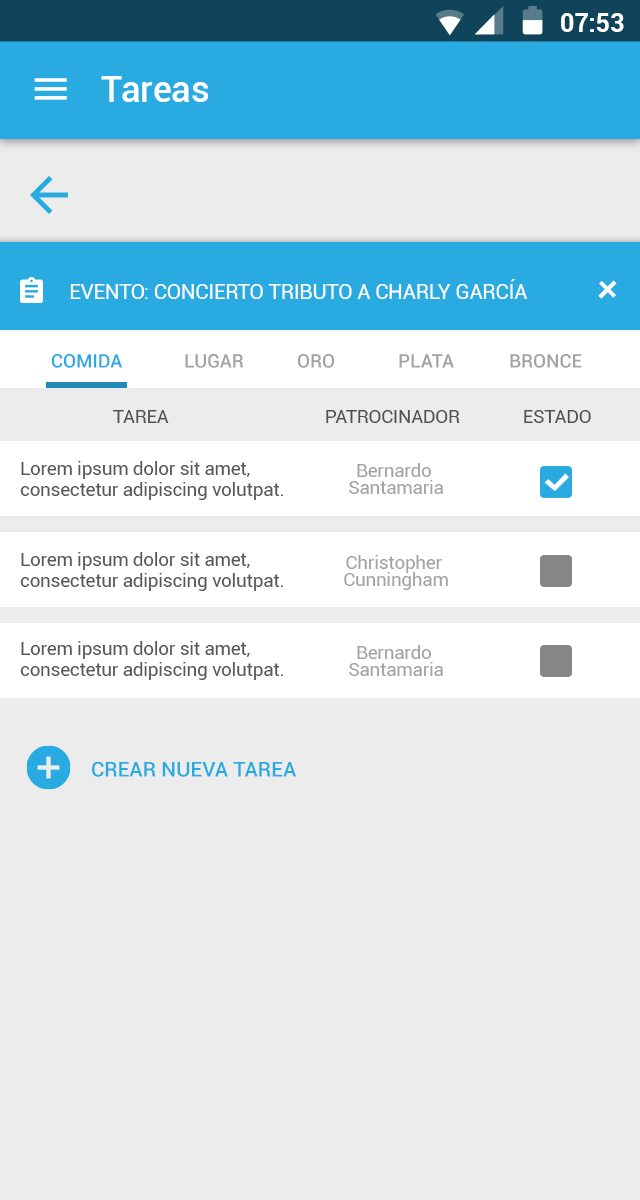
<style>
.page{position:relative;width:640px;height:1200px;background:#ececec}
.page>*{position:absolute;margin:0}
.t1{font:24.9px "Roboto-Bold";color:#ffffff}
.t2{font:35.8px "Roboto-Medium";letter-spacing:0.005em;color:#ffffff}
.t3{font:20.8px "Roboto-Regular";letter-spacing:-0.01em;color:#ffffff}
.t4{font:41.5px "Roboto-Regular";letter-spacing:-0.01em;color:#ffffff}
.t5{font:18.8px "Roboto-Medium";color:#29abe2}
.t6{font:18.8px "Roboto-Medium";color:#a3a3a3}
.t7{font:18.7px "Roboto-Regular";letter-spacing:-0.01em;color:#515151}
.t8{font:18.8px/20.8px "Roboto-Regular";letter-spacing:-0.01em;color:#585858}
.t9{font:18.8px/17px "Roboto-Regular";letter-spacing:-0.01em;color:#a3a3a3}
.t10{font:20.8px "Roboto-Medium";color:#29abe2}
</style>
<div class="page">
<p class="t1" style="left:561px;top:13px;width:63px;height:19px">07:53</p>
<p class="t2" style="left:101px;top:76px;width:108px;height:26px">Tareas</p>
<p class="t3" style="left:70px;top:279px;width:457px;height:20px">EVENTO: CONCIERTO TRIBUTO A CHARLY GARCÍA</p>
<p class="t4" style="left:598px;top:280px;width:19px;height:19px;rotate:45deg">+</p>
<p class="t5" style="left:52px;top:354px;width:70px;height:14px">COMIDA</p>
<p class="t6" style="left:185px;top:354px;width:59px;height:14px">LUGAR</p>
<p class="t6" style="left:298px;top:354px;width:36px;height:14px">ORO</p>
<p class="t6" style="left:399px;top:354px;width:55px;height:14px">PLATA</p>
<p class="t6" style="left:510px;top:354px;width:72px;height:14px">BRONCE</p>
<p class="t7" style="left:113px;top:410px;width:56px;height:13px">TAREA</p>
<p class="t7" style="left:326px;top:410px;width:134px;height:13px">PATROCINADOR</p>
<p class="t7" style="left:524px;top:410px;width:67px;height:13px">ESTADO</p>
<p class="t8" style="left:20px;top:461px;width:263px;height:39px">Lorem ipsum dolor sit amet, consectetur adipiscing volutpat.</p>
<p class="t9" style="left:349px;top:463px;width:94px;height:31px;text-align:center">Bernardo <br>Santamaria</p>
<p class="t8" style="left:20px;top:552px;width:263px;height:39px">Lorem ipsum dolor sit amet, consectetur adipiscing volutpat.</p>
<p class="t9" style="left:344px;top:555px;width:104px;height:35px;text-align:center">Christopher <br>Cunningham</p>
<p class="t8" style="left:20px;top:641px;width:263px;height:39px">Lorem ipsum dolor sit amet, consectetur adipiscing volutpat.</p>
<p class="t9" style="left:349px;top:645px;width:94px;height:31px;text-align:center">Bernardo <br>Santamaria</p>
<p class="t10" style="left:92px;top:761px;width:204px;height:16px">CREAR NUEVA TAREA</p>
</div>
